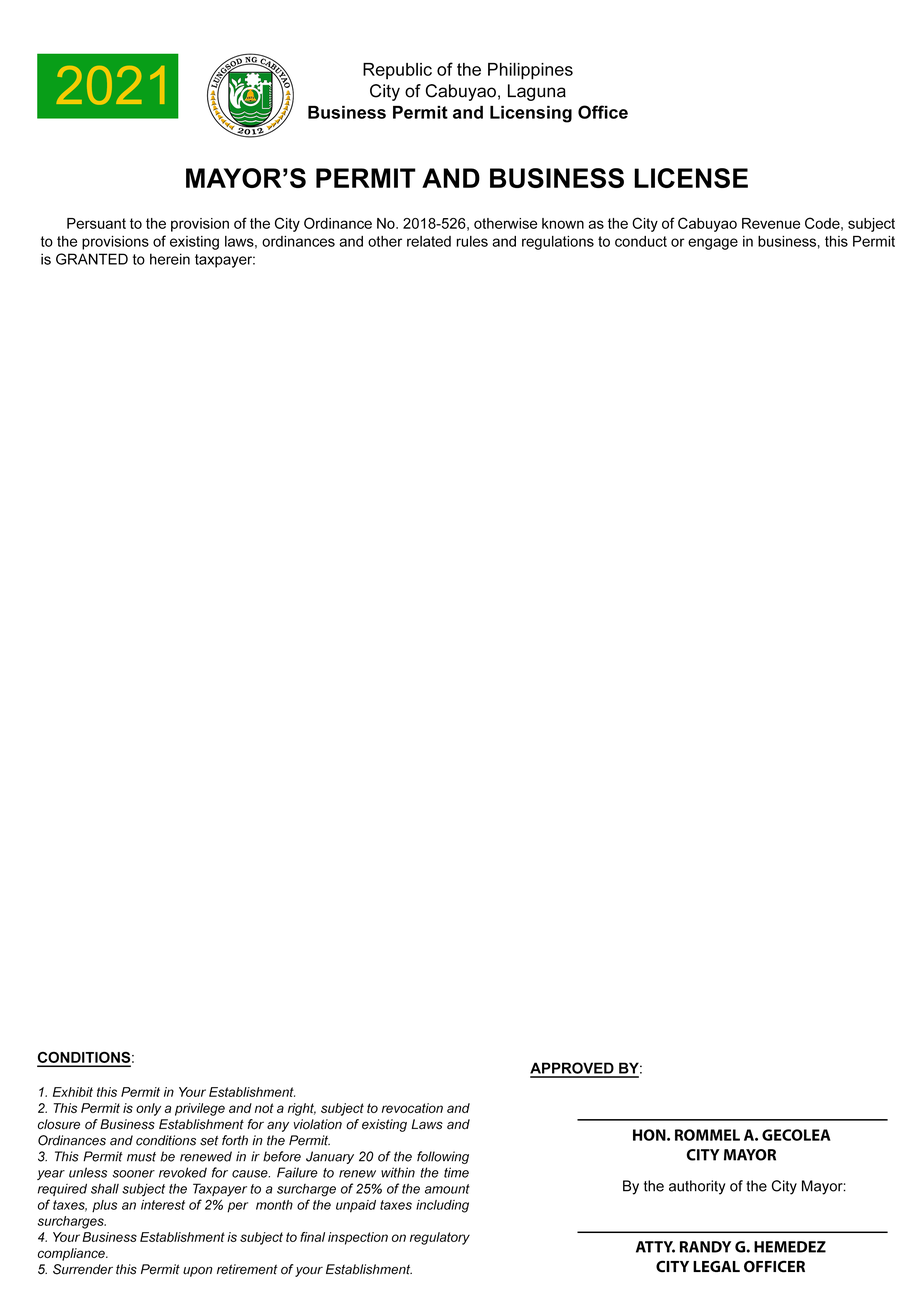
<style>
.page{position:relative;width:913px;height:1305px;background:#ffffff}
.page>*{position:absolute;margin:0}
.t1{font:53.7px "ArialMT";color:#f5cb03}
.t2{font:17.9px "ArialMT";color:#000000}
.t3{font:17.9px "Arial-BoldMT";color:#000000}
.t4{font:26.9px "Arial-BoldMT";color:#000000}
.t5{font:14.9px "ArialMT";color:#000000}
.t6{font:13.4px "Arial-ItalicMT";color:#000000}
.t7{font:14.9px "Arial-BoldMT";color:#000000;text-decoration:underline}
.t8{font:16.4px "MyriadPro-Bold";color:#000000}
</style>
<div class="page">
<p class="t1" style="left:56px;top:66px;width:109px;height:39px">2021</p>
<p class="t2" style="left:308px;top:63px;width:320px;height:60px;text-align:center">Republic of the Philippines<br>City of Cabuyao, Laguna<br><span class="t3">Business Permit and Licensing Office</span></p>
<p class="t4" style="left:186px;top:168px;width:562px;height:20px">MAYOR’S PERMIT AND BUSINESS LICENSE</p>
<p class="t5" style="left:40px;top:218px;width:856px;height:50px;text-align:justify">Persuant to the provision of the City Ordinance No. 2018-526, otherwise known as the City of Cabuyao Revenue Code, subject to the provisions of existing laws, ordinances and other related rules and regulations to conduct or engage in business, this Permit is GRANTED to herein taxpayer:</p>
<p class="t6" style="left:37px;top:1052px;width:433px;height:225px;text-align:justify"><span class="t7">CONDITIONS</span><span class="t5">:<br><br></span>1. Exhibit this Permit in Your Establishment.<br>2. This Permit is only a privilege and not a right, subject to revocation and closure of Business Establishment for any violation of existing Laws and Ordinances and conditions set forth in the Permit.<br>3. This Permit must be renewed in ir before January 20 of the following year unless sooner revoked for cause. Failure to renew within the time required shall subject the Taxpayer to a surcharge of 25% of the amount of taxes, plus an interest of 2% per  month of the unpaid taxes including surcharges.<br>4. Your Business Establishment is subject to final inspection on regulatory compliance.<br>5. Surrender this Permit upon retirement of your Establishment.</p>
<p class="t7" style="left:531px;top:1063px;width:111px;height:15px">APPROVED BY<span class="t5">:</span></p>
<p class="t8" style="left:633px;top:1129px;width:198px;height:32px;text-align:center">HON. ROMMEL A. GECOLEA<br>CITY MAYOR</p>
<p class="t5" style="left:623px;top:1180px;width:223px;height:15px">By the authority of the City Mayor:</p>
<p class="t8" style="left:636px;top:1241px;width:190px;height:32px;text-align:center">ATTY. RANDY G. HEMEDEZ<br>CITY LEGAL OFFICER</p>
</div>
